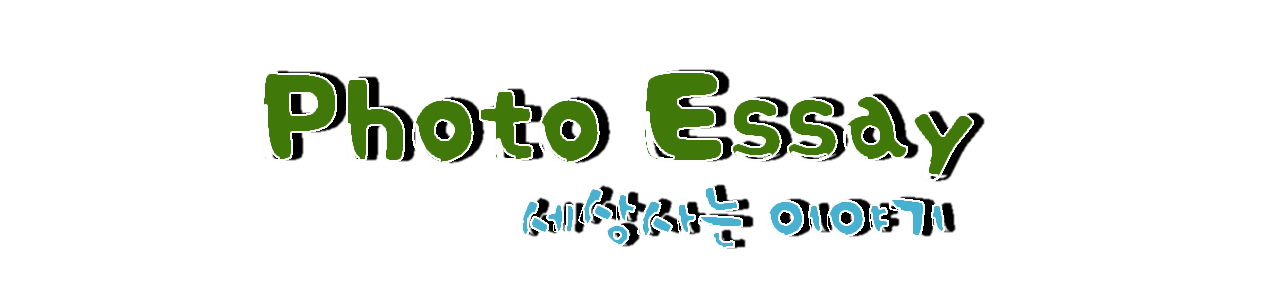
<style>
.page{position:relative;width:1280px;height:302px;background:#ffffff}
.page>*{position:absolute;margin:0}
.t1{font:133.3px "HUBubbS";color:#41780a}
.t2{font:66.7px "HUBubbS";color:#48b1cf}
</style>
<div class="page">
<p class="t1" style="left:261px;top:71px;width:713px;height:178px">Photo Essay<br>              <span class="t2"> 세상사는 이야기</span></p>
</div>
